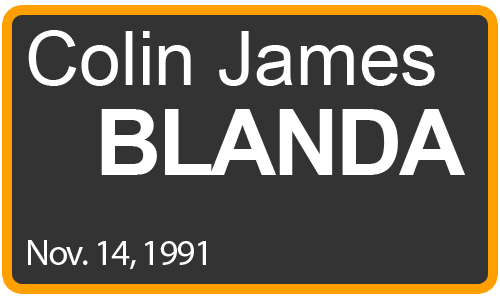
<style>
.page{position:relative;width:500px;height:300px;background:#333333}
.page>*{position:absolute;margin:0}
.t1{font:75px "ArialMT";color:#ffffff}
.t2{font:92px "Arial-BoldMT";letter-spacing:-0.04em;color:#ffffff}
.t3{font:37px "MyriadPro-Regular";letter-spacing:-0.04em;color:#ffffff}
</style>
<div class="page">
<p class="t1" style="left:28px;top:30px;width:407px;height:56px">Colin James</p>
<p class="t2" style="left:101px;top:109px;width:364px;height:66px">BLANDA</p>
<p class="t3" style="left:28px;top:240px;width:178px;height:30px">Nov. 14, 1991</p>
</div>
